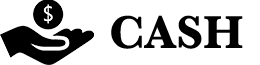
<style>
.page{position:relative;width:260px;height:65px;background:#ffffff}
.page>*{position:absolute;margin:0}
.t1{font:48px "Baskerville-Bold";color:#000000}
</style>
<div class="page">
<p class="t1" style="left:111px;top:15px;width:132px;height:34px">CASH</p>
</div>
